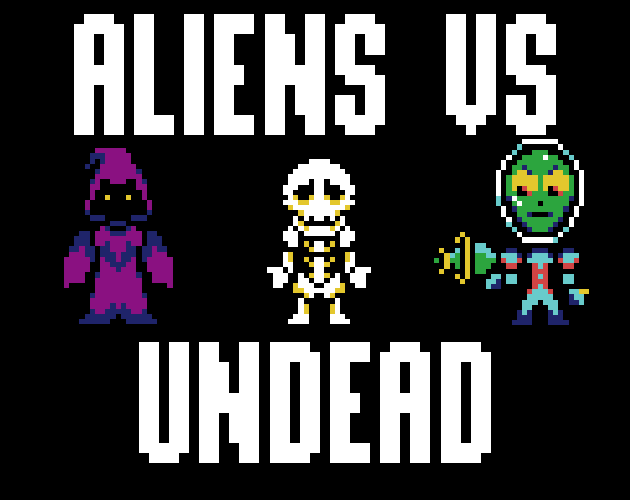
<style>
.page{position:relative;width:630px;height:500px;background:#000000}
.page>*{position:absolute;margin:0}
.t1{font:160.8px "Rockboxcond12";color:#ffffff}
</style>
<div class="page">
<p class="t1" style="left:74px;top:14px;width:482px;height:121px">ALIENS VS</p>
<p class="t1" style="left:139px;top:342px;width:352px;height:121px">UNDEAD</p>
</div>
